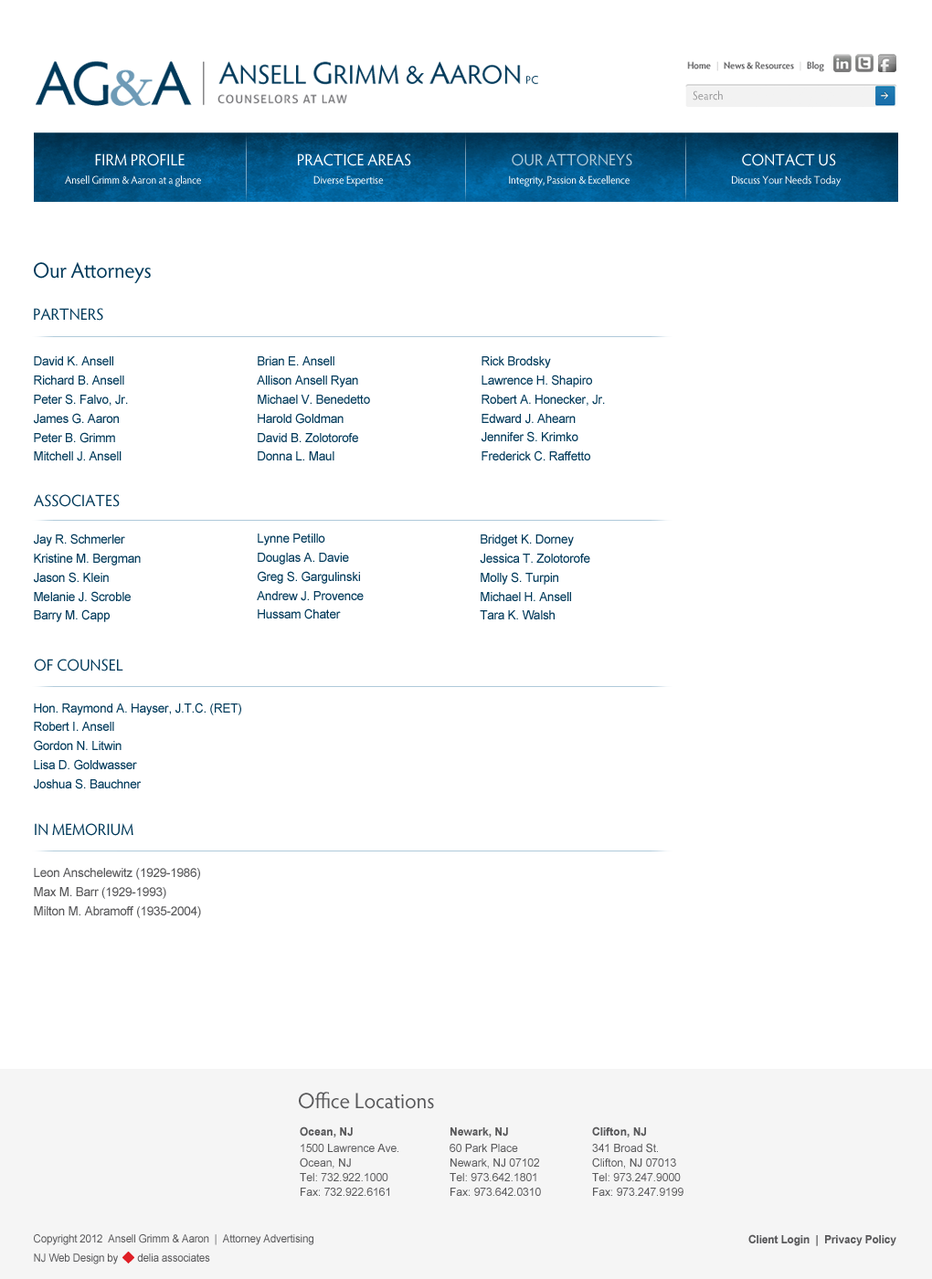
<style>
.page{position:relative;width:932px;height:1279px;background:#ffffff}
.page>*{position:absolute;margin:0}
.t1{font:11.9px "HypatiaSansPro-Regular";color:#969697;scale:0.96 1}
.t2{font:16.4px "HypatiaSansPro-Regular";color:#ffffff;scale:0.96 1}
.t3{font:16.4px "HypatiaSansPro-Regular";color:#b0cada;scale:0.96 1}
.t4{font:11px "HypatiaSansPro-Regular";letter-spacing:-0.01em;color:#ffffff;scale:0.95 1}
.t5{font:21.9px "HypatiaSansPro-Regular";letter-spacing:-0.015em;color:#00395a;scale:0.96 1}
.t6{font:16.4px "HypatiaSansPro-Regular";color:#00395a;scale:0.96 1}
.t7{font:12.8px "ArialMT";letter-spacing:-0.015em;color:#00395a;scale:0.96 1}
.t8{font:12.8px "ArialMT";letter-spacing:-0.015em;color:#58585a;scale:0.96 1}
.t9{font:21.9px "HypatiaSansPro-Regular";letter-spacing:-0.005em;color:#58585a;scale:0.97 1}
.t10{font:11.4px/11px "ArialMT";color:#58585a;scale:0.96 1}
.t11{font:11.4px/11px "Arial-BoldMT";color:#58585a;scale:0.96 1}
.t12{font:11.4px/12.8px "ArialMT";color:#58585a;scale:0.96 1}
.t13{font:11px "ArialMT";letter-spacing:-0.015em;color:#58585a;scale:0.96 1}
.t14{font:11px/15.5px "ArialMT";letter-spacing:-0.015em;color:#58585a;scale:0.96 1}
.t15{font:11.4px "Arial-BoldMT";letter-spacing:-0.015em;color:#58585a;scale:0.96 1}
</style>
<div class="page">
<p class="t1" style="left:693px;top:90px;width:30px;height:11px">Search</p>
<p class="t2" style="left:95px;top:154px;width:741px;height:12px">FIRM PROFILE              PRACTICE AREAS                  <span class="t3">OUR ATTORNEYS</span>                  CONTACT US</p>
<p class="t4" style="left:65px;top:175px;width:777px;height:12px">Ansell Grimm &amp; Aaron at a glance                                                    Diverse Expertise                                                          Integrity, Passion &amp; Excellence                                               Discuss Your Needs Today</p>
<p class="t5" style="left:34px;top:262px;width:117px;height:21px">Our Attorneys</p>
<p class="t6" style="left:34px;top:308px;width:69px;height:13px">PARTNERS</p>
<p class="t7" style="left:34px;top:356px;width:94px;height:105px">David K. Ansell<br>Richard B. Ansell<br>Peter S. Falvo, Jr.<br>James G. Aaron<br>Peter B. Grimm<br>Mitchell J. Ansell</p>
<p class="t7" style="left:257px;top:356px;width:113px;height:105px">Brian E. Ansell<br>Allison Ansell Ryan<br>Michael V. Benedetto<br>Harold Goldman<br>David B. Zolotorofe<br>Donna L. Maul</p>
<p class="t7" style="left:482px;top:356px;width:123px;height:105px">Rick Brodsky<br>Lawrence H. Shapiro<br>Robert A. Honecker, Jr.<br>Edward J. Ahearn<br>Jennifer S. Krimko<br>Frederick C. Raffetto</p>
<p class="t6" style="left:34px;top:494px;width:86px;height:13px">ASSOCIATES</p>
<p class="t7" style="left:34px;top:534px;width:107px;height:88px">Jay R. Schmerler<br>Kristine M. Bergman<br>Jason S. Klein<br>Melanie J. Scroble<br>Barry M. Capp</p>
<p class="t7" style="left:257px;top:534px;width:107px;height:86px">Lynne Petillo<br>Douglas A. Davie<br>Greg S. Gargulinski<br>Andrew J. Provence<br>Hussam Chater</p>
<p class="t7" style="left:480px;top:535px;width:110px;height:85px">Bridget K. Dorney<br>Jessica T. Zolotorofe<br>Molly S. Turpin<br>Michael H. Ansell<br>Tara K. Walsh</p>
<p class="t6" style="left:34px;top:659px;width:89px;height:13px">OF COUNSEL</p>
<p class="t7" style="left:34px;top:703px;width:207px;height:87px">Hon. Raymond A. Hayser, J.T.C. (RET)<br>Robert I. Ansell<br>Gordon N. Litwin<br>Lisa D. Goldwasser<br>Joshua S. Bauchner</p>
<p class="t6" style="left:35px;top:823px;width:98px;height:13px">IN MEMORIUM</p>
<p class="t8" style="left:34px;top:868px;width:167px;height:50px">Leon Anschelewitz (1929-1986)<br>Max M. Barr (1929-1993)<br>Milton M. Abramoff (1935-2004)</p>
<p class="t9" style="left:299px;top:1092px;width:135px;height:17px">Office Locations</p>
<p class="t10" style="left:300px;top:1127px;width:98px;height:69px"><span class="t11">Ocean, NJ<br></span><span class="t12">1500 Lawrence Ave</span>.<br>Ocean, NJ<br>Tel: 732.922.1000<br>Fax: 732.922.6161</p>
<p class="t10" style="left:450px;top:1128px;width:91px;height:68px"><span class="t11">Newark, NJ<br></span><span class="t12">60 Park Place<br></span>Newark, NJ 07102<br>Tel: 973.642.1801<br>Fax: 973.642.0310</p>
<p class="t10" style="left:592px;top:1127px;width:92px;height:69px"><span class="t11">Clifton, NJ<br></span><span class="t12">341 Broad St.<br></span>Clifton, NJ 07013<br>Tel: 973.247.9000<br>Fax: 973.247.9199</p>
<p class="t13" style="left:34px;top:1235px;width:279px;height:30px">Copyright 2012  Ansell Grimm &amp; Aaron  |  Attorney Advertising<br><span class="t14">NJ Web Design by       delia associates</span></p>
<p class="t15" style="left:748px;top:1235px;width:148px;height:11px">Client Login  |  Privacy Policy</p>
</div>
